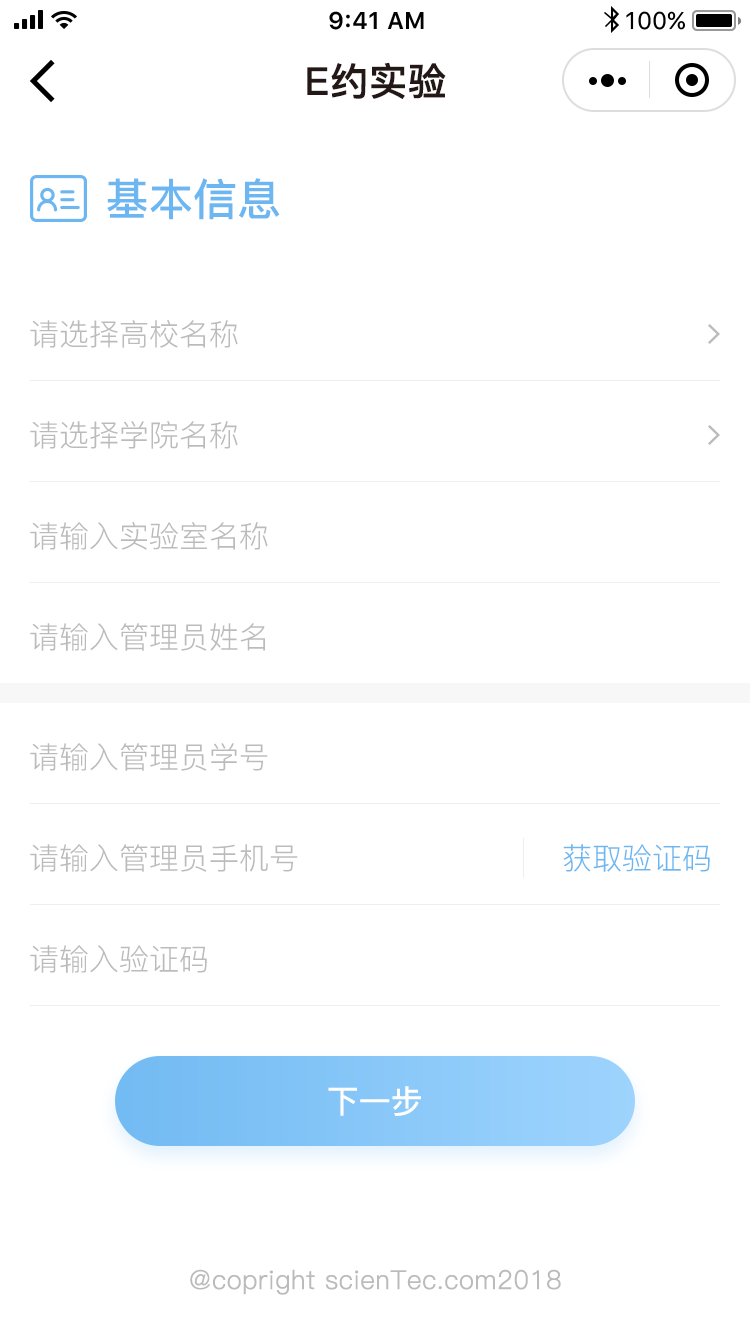
<style>
.page{position:relative;width:750px;height:1334px;background:#ffffff}
.page>*{position:absolute;margin:0}
.t1{font:38px "PingFang-SC-Bold";color:#231815;font-weight:bold}
.t2{font:44px "PingFang-SC-Bold";color:#6cb7f1}
.t3{font:30px "PingFang-SC-Regular";color:#bbbbbb}
.t4{font:30px "PingFang-SC-Regular";color:#6cb7f1}
.t5{font:32px "PingFang-SC-Bold";color:#ffffff}
.t6{font:26px "PingFang-SC-Regular";color:#bbbbbb;font-weight:bold}
</style>
<div class="page">
<p class="t1" style="left:307px;top:62px;width:139px;height:38px">E约实验</p>
<p class="t2" style="left:107px;top:178px;width:173px;height:42px">基本信息</p>
<p class="t3" style="left:30px;top:320px;width:208px;height:28px">请选择高校名称</p>
<p class="t3" style="left:30px;top:421px;width:208px;height:28px">请选择学院名称</p>
<p class="t3" style="left:30px;top:522px;width:238px;height:28px">请输入实验室名称</p>
<p class="t3" style="left:30px;top:623px;width:235px;height:28px">请输入管理员姓名</p>
<p class="t3" style="left:30px;top:743px;width:238px;height:28px">请输入管理员学号</p>
<p class="t3" style="left:30px;top:844px;width:268px;height:28px">请输入管理员手机号</p>
<p class="t4" style="left:563px;top:844px;width:147px;height:28px">获取验证码</p>
<p class="t3" style="left:30px;top:945px;width:177px;height:28px">请输入验证码</p>
<p class="t5" style="left:328px;top:1086px;width:93px;height:30px">下一步</p>
<p class="t6" style="left:190px;top:1269px;width:371px;height:26px">@copright scienTec.com2018</p>
</div>
